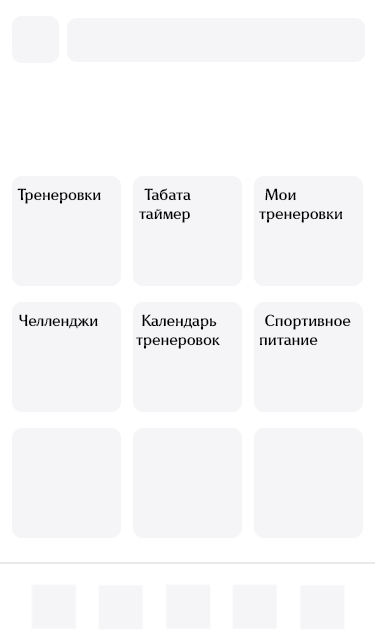
<style>
.page{position:relative;width:375px;height:640px;background:#f5f4f7}
.page>*{position:absolute;margin:0}
.t1{font:16px "Faberge-Regular";color:#000000}
</style>
<div class="page">
<p class="t1" style="left:17px;top:188px;width:84px;height:16px">Тренеровки</p>
<p class="t1" style="left:139px;top:188px;width:52px;height:35px">Табата таймер</p>
<p class="t1" style="left:259px;top:188px;width:84px;height:35px">Мои тренеровки</p>
<p class="t1" style="left:19px;top:314px;width:79px;height:15px">Челленджи</p>
<p class="t1" style="left:136px;top:314px;width:84px;height:35px">Календарь тренеровок</p>
<p class="t1" style="left:259px;top:314px;width:92px;height:32px">Спортивное       питание</p>
</div>
